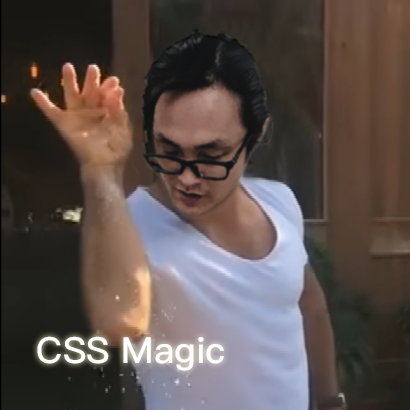
<style>
.page{position:relative;width:410px;height:410px}
.page>*{position:absolute;margin:0}
.t1{font:36px "PingFangTC-Medium";color:#ffffff}
</style>
<div class="page">
<p class="t1" style="left:37px;top:336px;width:187px;height:35px">CSS Magic</p>
</div>
